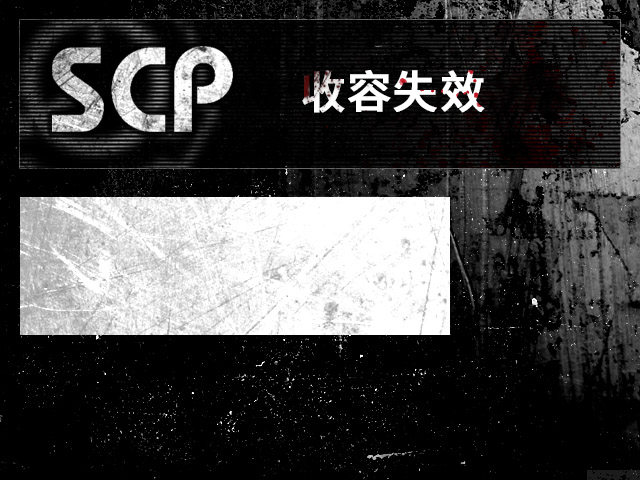
<style>
.page{position:relative;width:640px;height:480px;background:#000000}
.page>*{position:absolute;margin:0}
.t1{font:45px "SourceHanSansCN-Medium";color:#ffffff;font-weight:bold}
</style>
<div class="page">
<p class="t1" style="left:302px;top:70px;width:183px;height:43px">收容失效</p>
</div>
